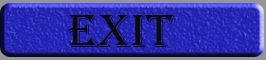
<style>
.page{position:relative;width:266px;height:60px}
.page>*{position:absolute;margin:0}
.t1{font:48px "Algerian";color:#0c0c0c}
</style>
<div class="page">
<p class="t1" style="left:68px;top:15px;width:107px;height:32px">EXIT</p>
</div>
